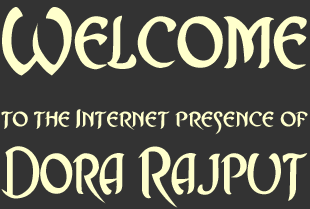
<style>
.page{position:relative;width:310px;height:209px;background:#333333}
.page>*{position:absolute;margin:0}
.t1{font:27.9px/55.7px "Asrafel";color:#ffffcc;scale:1.05 1}
.t2{font:97.5px/41.8px "Asrafel";color:#ffffcc;scale:0.9 1}
.t3{font:76.6px/69.7px "Asrafel";color:#ffffcc;scale:0.81 1}
</style>
<div class="page">
<p class="t1" style="left:1px;top:7px;width:307px;height:201px"><span class="t2">Welcome<br></span>to the Internet presence of<br><span class="t3">Dora Rajput</span></p>
</div>
